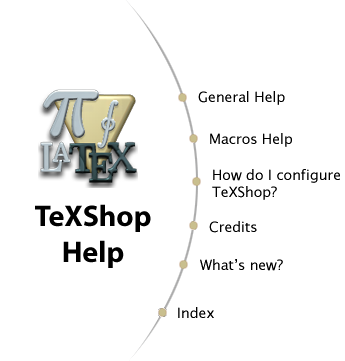
<style>
.page{position:relative;width:345px;height:361px;background:#ffffff}
.page>*{position:absolute;margin:0}
.t1{font:14px "LucidaGrande";color:#000000}
.t2{font:30px "MyriadPro-Bold";color:#000000}
</style>
<div class="page">
<p class="t1" style="left:198px;top:91px;width:87px;height:14px">General Help</p>
<p class="t1" style="left:210px;top:133px;width:82px;height:14px">Macros Help</p>
<p class="t1" style="left:212px;top:169px;width:128px;height:31px">How do I configure<br>TeXShop?</p>
<p class="t2" style="left:35px;top:204px;width:116px;height:64px;text-align:center">TeXShop<br>Help</p>
<p class="t1" style="left:209px;top:221px;width:48px;height:12px">Credits</p>
<p class="t1" style="left:200px;top:259px;width:83px;height:12px">What’s new?</p>
<p class="t1" style="left:178px;top:307px;width:36px;height:11px">Index</p>
</div>
